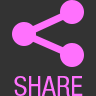
<style>
.page{position:relative;width:96px;height:96px;background:#333333}
.page>*{position:absolute;margin:0}
.t1{font:28px "HelveticaNeueLTStd-Cn";color:#ff71fd;text-transform:uppercase}
</style>
<div class="page">
<p class="t1" style="left:14px;top:76px;width:69px;height:20px">SHARE</p>
</div>
